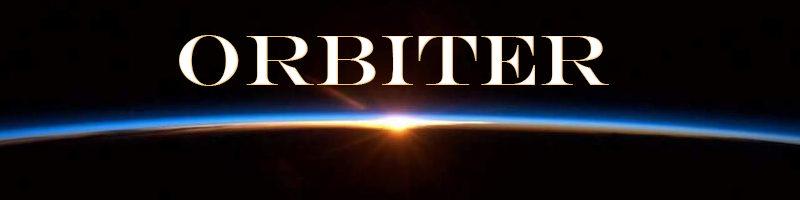
<style>
.page{position:relative;width:800px;height:200px;background:#050100}
.page>*{position:absolute;margin:0}
.t1{font:72px "EngraversMT";color:#ffffff}
</style>
<div class="page">
<p class="t1" style="left:179px;top:35px;width:430px;height:51px">Orbiter</p>
</div>
